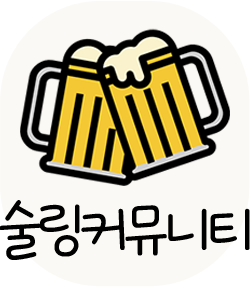
<style>
.page{position:relative;width:250px;height:287px;background:#fbf9f5}
.page>*{position:absolute;margin:0}
.t1{font:83.3px "GangwonEduSaeeumMedium";letter-spacing:-0.06em;color:#000000}
</style>
<div class="page">
<p class="t1" style="left:0px;top:200px;width:250px;height:60px">술링커뮤니티</p>
</div>
